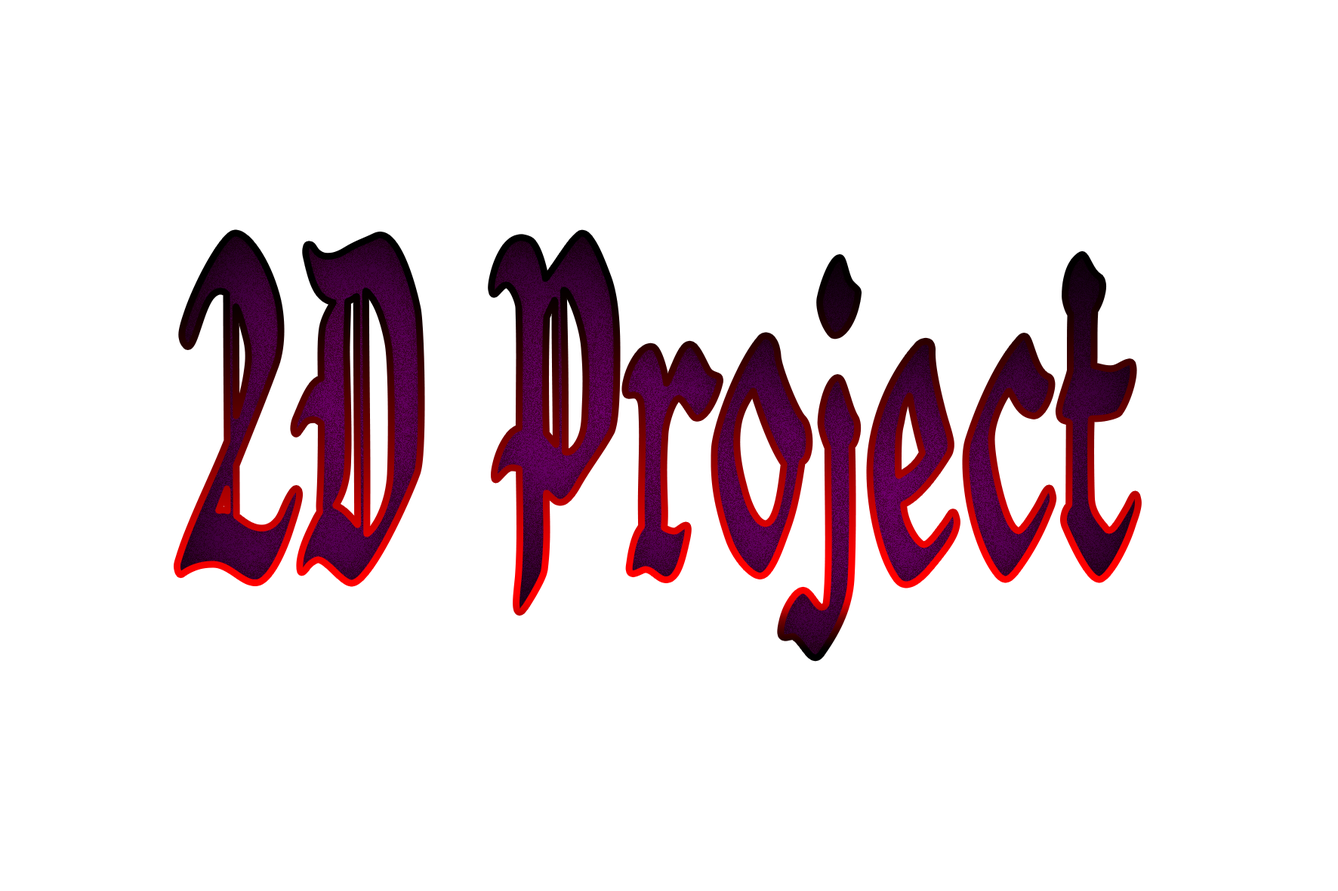
<style>
.page{position:relative;width:1338px;height:891px;background:#ffffff}
.page>*{position:absolute;margin:0}
.t1{font:427.2px "CCGothChic-Black";scale:0.51 1}
</style>
<div class="page">
<p class="t1" style="left:177px;top:233px;width:961px;height:425px">2D Project</p>
</div>
